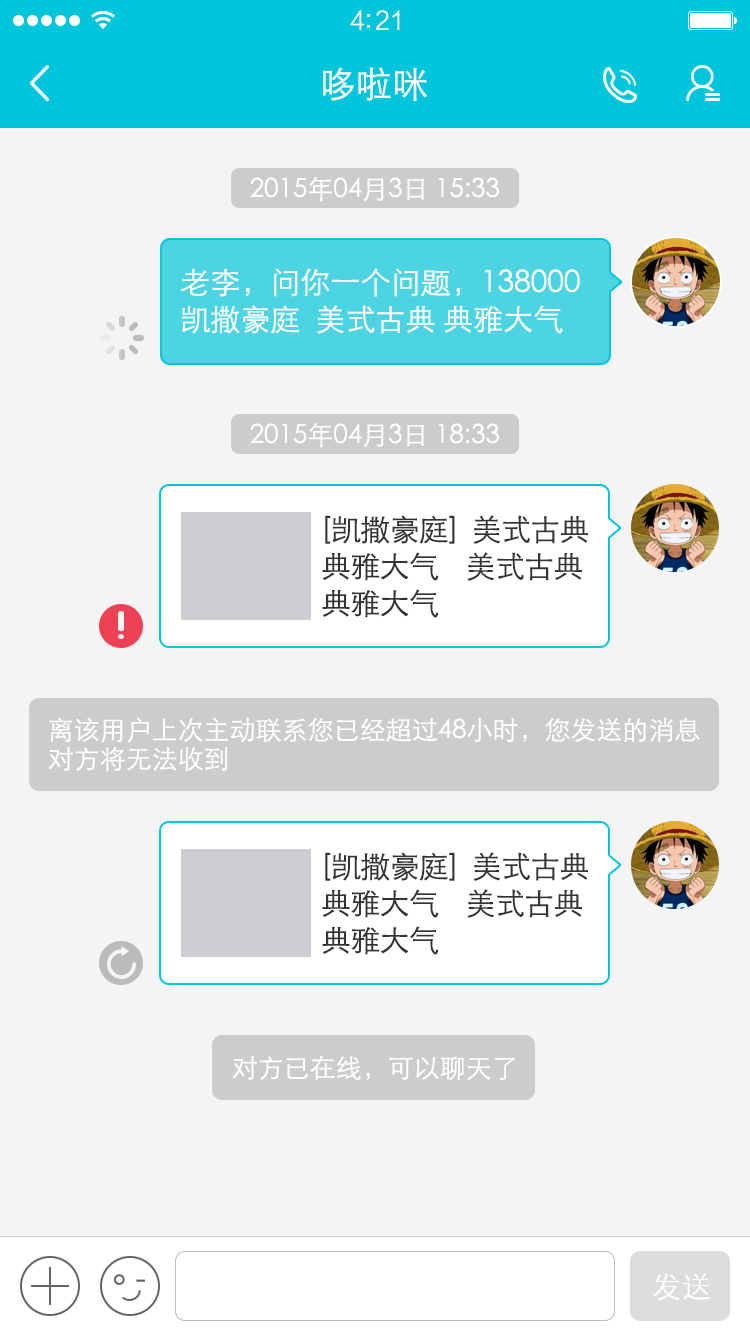
<style>
.page{position:relative;width:750px;height:1334px;background:#f4f4f4}
.page>*{position:absolute;margin:0}
.t1{font:25px "FZLTXHK";letter-spacing:-0.02em;color:#ffffff}
.t2{font:36px "STXihei";color:#ffffff}
.t3{font:26px "STXihei";color:#ffffff}
.t4{font:30px/37px "STXihei";letter-spacing:-0.005em;color:#ffffff}
.t5{font:30px/36.9px "STXihei";letter-spacing:-0.025em;color:#333333}
.t6{font:26px/29px "STXihei";color:#ffffff}
.t7{font:30px "STXihei";color:#ffffff}
</style>
<div class="page">
<p class="t1" style="left:350px;top:10px;width:50px;height:20px">4:21</p>
<p class="t2" style="left:323px;top:67px;width:104px;height:34px">哆啦咪</p>
<p class="t3" style="left:250px;top:176px;width:249px;height:26px">2015年04月3日 15:33</p>
<p class="t4" style="left:180px;top:268px;width:400px;height:66px">老李，问你一个问题，138000<br>凯撒豪庭  美式古典 典雅大气</p>
<p class="t3" style="left:250px;top:422px;width:249px;height:26px">2015年04月3日 18:33</p>
<p class="t5" style="left:322px;top:515px;width:266px;height:103px">[凯撒豪庭]  美式古典 <br>典雅大气    美式古典 <br>典雅大气</p>
<p class="t6" style="left:48px;top:717px;width:652px;height:55px">离该用户上次主动联系您已经超过48小时，您发送的消息<br>对方将无法收到</p>
<p class="t5" style="left:322px;top:852px;width:266px;height:103px">[凯撒豪庭]  美式古典 <br>典雅大气    美式古典 <br>典雅大气</p>
<p class="t3" style="left:232px;top:1055px;width:283px;height:26px">对方已在线，可以聊天了</p>
<p class="t7" style="left:653px;top:1273px;width:57px;height:28px">发送</p>
</div>
